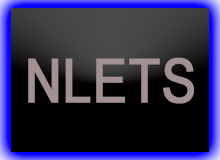
<style>
.page{position:relative;width:220px;height:160px;background:#000000}
.page>*{position:absolute;margin:0}
.t1{font:60.8px "ArialMT";color:#a49191;font-weight:bold;scale:0.84 1}
</style>
<div class="page">
<p class="t1" style="left:28px;top:57px;width:166px;height:47px">NLETS</p>
</div>
